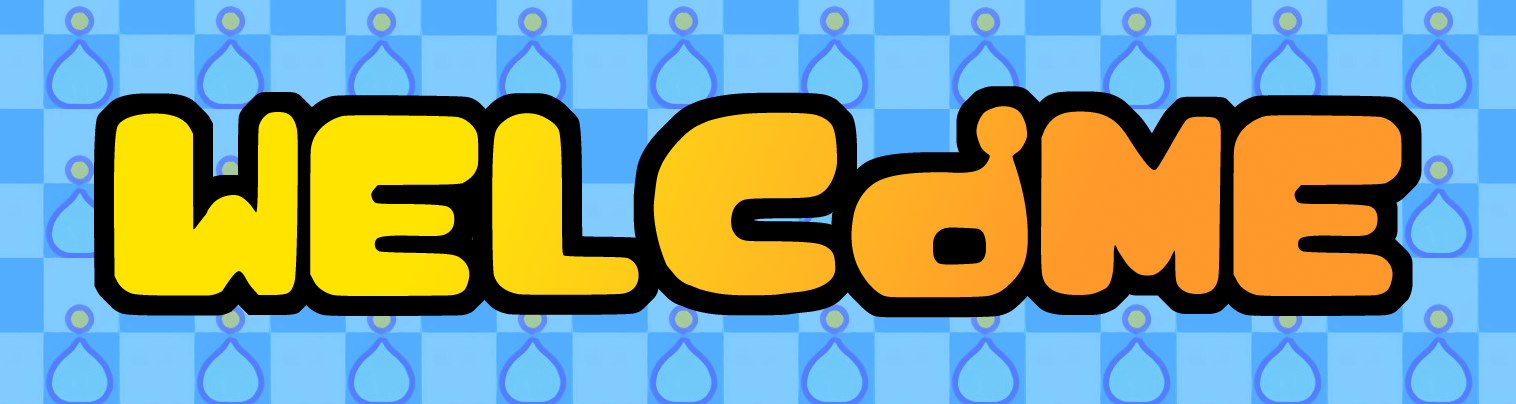
<style>
.page{position:relative;width:1516px;height:404px}
.page>*{position:absolute;margin:0}
.t1{font:250px "Chaolphabet-Regular"}
</style>
<div class="page">
<p class="t1" style="left:114px;top:106px;width:1288px;height:192px">WELCOME</p>
</div>
